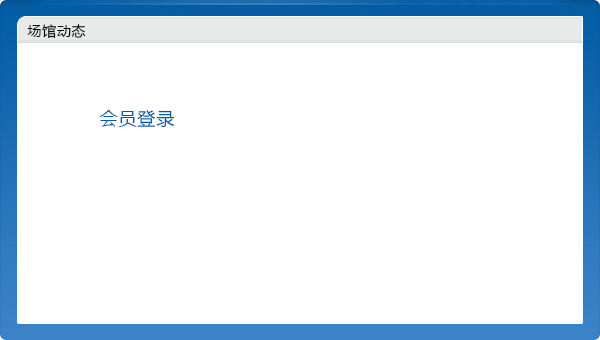
<style>
.page{position:relative;width:600px;height:340px;background:#ffffff}
.page>*{position:absolute;margin:0}
.t1{font:14px "MicrosoftYaHei";letter-spacing:0.05em;color:#000000}
.t2{font:18px "MicrosoftYaHei";letter-spacing:0.05em;color:#005ba2}
</style>
<div class="page">
<p class="t1" style="left:27px;top:24px;width:59px;height:15px">场馆动态</p>
<p class="t2" style="left:99px;top:110px;width:76px;height:18px">会员登录</p>
</div>
